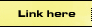
<style>
.page{position:relative;width:92px;height:27px}
.page>*{position:absolute;margin:0}
.t1{font:10px "MicrogrammaD-BoldExte";letter-spacing:0.05em;color:#000000}
</style>
<div class="page">
<p class="t1" style="left:18px;top:10px;width:58px;height:7px">Link here</p>
</div>
